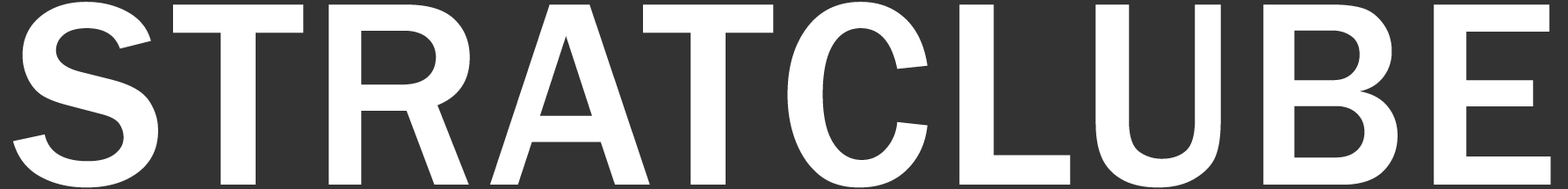
<style>
.page{position:relative;width:1568px;height:189px;background:#333333}
.page>*{position:absolute;margin:0}
.t1{font:269.6px "FranklinGothic-Medium";letter-spacing:0.025em;color:#ffffff}
</style>
<div class="page">
<p class="t1" style="left:13px;top:2px;width:1538px;height:186px">STRATCLUBE</p>
</div>
